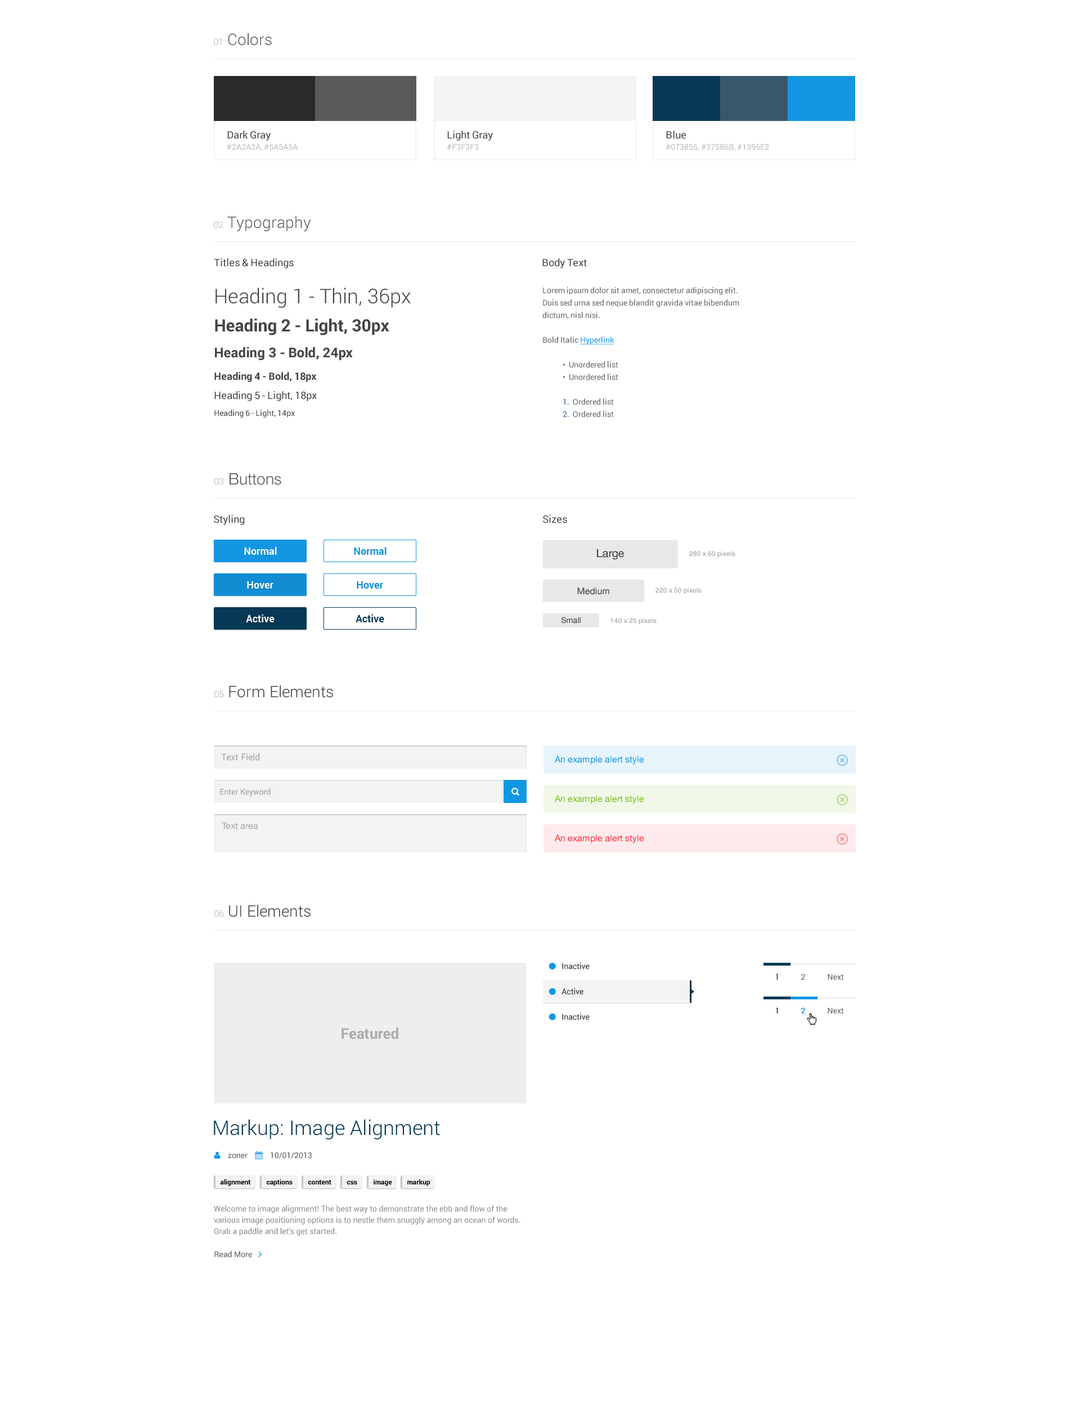
<style>
.page{position:relative;width:1069px;height:1418px;background:#ffffff}
.page>*{position:absolute;margin:0}
.t1{font:15.8px "Roboto-Light";color:#5a5a5a}
.t2{font:9px "Roboto-Light";color:#aaaaaa}
.t3{font:7.9px/11.2px "Roboto-Regular";color:#bbbbbb;text-transform:uppercase}
.t4{font:10.1px "Roboto-Regular";color:#444444}
.t5{font:16.9px/28.1px "Roboto-Bold";color:#444444}
.t6{font:20.2px/28.1px "Roboto-Light";color:#444444}
.t7{font:13.5px/25.9px "Roboto-Bold";color:#444444}
.t8{font:10.1px/22.5px "Roboto-Bold";color:#444444}
.t9{font:10.1px/19.1px "Roboto-Regular";color:#444444}
.t10{font:7.9px/16.9px "Roboto-Regular";color:#444444}
.t11{font:7.9px/12.4px "Roboto-Regular";color:#666666}
.t12{font:7.9px/12.4px "Roboto-Regular";color:#1396e2;text-decoration:underline}
.t13{font:7.9px/12.4px "Roboto-Regular";color:#3464a7}
.t14{font:15.8px "HelveticaNeue-Light";color:#5a5a5a}
.t15{font:9px "HelveticaNeue-Light";color:#aaaaaa}
.t16{font:10.1px "Roboto-Bold";color:#ffffff}
.t17{font:10.1px "Roboto-Bold";color:#1396e2}
.t18{font:11.2px "HelveticaNeue";color:#3b3b3b}
.t19{font:6.8px "HelveticaNeue-Medium";color:#a4a4a4}
.t20{font:10.1px "Roboto-Bold";color:#128dd4}
.t21{font:9px "HelveticaNeue";color:#3b3b3b}
.t22{font:10.1px "Roboto-Bold";color:#073855}
.t23{font:7.9px "HelveticaNeue";color:#3b3b3b}
.t24{font:15.8px "Roboto-Light";color:#444444}
.t25{font:9px "Roboto-Regular";color:#a4a4a4}
.t26{font:9px "HelveticaNeue";color:#1396e2}
.t27{font:7.9px "Roboto-Regular";color:#999999}
.t28{font:9px "HelveticaNeue";color:#76bd22}
.t29{font:9px "HelveticaNeue";color:#a4a4a4}
.t30{font:9px "HelveticaNeue";color:#f63440}
.t31{font:7.9px "Roboto-Regular";color:#073855}
.t32{font:7.9px "Roboto-Regular";color:#5a5a5a}
.t33{font:7.9px "Roboto-Regular";color:#1396e2}
.t34{font:14.6px "Roboto-Bold";color:#aaaaaa}
.t35{font:20.2px "Roboto-Light";color:#073855}
.t36{font:6.7px "Roboto-Bold";color:#000000}
.t37{font:7.9px/11.2px "Roboto-Regular";color:#8b8b8b}
</style>
<div class="page">
<p class="t1" style="left:214px;top:33px;width:58px;height:13px"><span class="t2">01 </span>Colors</p>
<p class="t3" style="left:227px;top:130px;width:71px;height:21px"><span class="t4">Dark Gray<br></span>#2a2a2a, #5a5a5a</p>
<p class="t4" style="left:447px;top:130px;width:46px;height:20px">Light Gray<br><span class="t3">#f3f3f3</span></p>
<p class="t3" style="left:665px;top:130px;width:104px;height:21px"><span class="t4">Blue<br></span>#073855, #37586b, #1396e2</p>
<p class="t1" style="left:214px;top:215px;width:97px;height:16px"><span class="t2">02 </span>Typography</p>
<p class="t4" style="left:214px;top:258px;width:80px;height:10px">Titles &amp; Headings</p>
<p class="t4" style="left:542px;top:258px;width:45px;height:10px">Body Text</p>
<p class="t5" style="left:214px;top:287px;width:197px;height:130px"><span class="t6">Heading 1 - Thin, 36px<br></span>Heading 2 - Light, 30px<br><span class="t7">Heading 3 - Bold, 24px<br></span><span class="t8">Heading 4 - Bold, 18px<br></span><span class="t9">Heading 5 - Light, 18px<br></span><span class="t10">Heading 6 - Light, 14px</span></p>
<p class="t11" style="left:542px;top:287px;width:197px;height:130px">Lorem ipsum dolor sit amet, consectetur adipiscing elit. Duis sed urna sed neque blandit gravida vitae bibendum dictum, nisl nisi.<br><br>Bold Italic <span class="t12">Hyperlink <br><br> </span><span class="t13">•</span>  Unordered list<br> <span class="t13">•</span>  Unordered list<br><br> <span class="t13">1.</span>  Ordered list<br> <span class="t13">2.</span>  Ordered list</p>
<p class="t14" style="left:214px;top:473px;width:67px;height:12px"><span class="t15">03 </span>Buttons</p>
<p class="t4" style="left:214px;top:515px;width:31px;height:10px">Styling</p>
<p class="t4" style="left:543px;top:515px;width:24px;height:8px">Sizes</p>
<p class="t16" style="left:244px;top:547px;width:33px;height:8px">Normal</p>
<p class="t17" style="left:354px;top:547px;width:32px;height:8px">Normal</p>
<p class="t18" style="left:597px;top:548px;width:27px;height:12px">Large</p>
<p class="t19" style="left:689px;top:551px;width:46px;height:6px">280 x 60 pixels</p>
<p class="t16" style="left:247px;top:581px;width:26px;height:7px">Hover</p>
<p class="t20" style="left:357px;top:581px;width:26px;height:7px">Hover</p>
<p class="t21" style="left:577px;top:587px;width:32px;height:8px">Medium</p>
<p class="t19" style="left:655px;top:587px;width:46px;height:7px">220 x 50 pixels</p>
<p class="t16" style="left:246px;top:614px;width:28px;height:8px">Active</p>
<p class="t22" style="left:356px;top:614px;width:28px;height:8px">Active</p>
<p class="t23" style="left:561px;top:616px;width:19px;height:7px">Small</p>
<p class="t19" style="left:610px;top:618px;width:46px;height:6px">140 x 25 pixels</p>
<p class="t24" style="left:214px;top:685px;width:119px;height:13px"><span class="t2">05</span> Form Elements</p>
<p class="t25" style="left:221px;top:753px;width:39px;height:7px">Text Field</p>
<p class="t26" style="left:555px;top:755px;width:89px;height:9px">An example alert style</p>
<p class="t27" style="left:220px;top:788px;width:51px;height:8px">Enter Keyword</p>
<p class="t28" style="left:555px;top:795px;width:89px;height:9px">An example alert style</p>
<p class="t29" style="left:222px;top:822px;width:36px;height:7px">Text area</p>
<p class="t30" style="left:555px;top:834px;width:89px;height:9px">An example alert style</p>
<p class="t24" style="left:214px;top:904px;width:96px;height:13px"><span class="t2">06</span> UI Elements</p>
<p class="t31" style="left:775px;top:974px;width:3px;height:5px">1</p>
<p class="t32" style="left:801px;top:974px;width:4px;height:5px">2</p>
<p class="t32" style="left:827px;top:974px;width:17px;height:6px">Next</p>
<p class="t31" style="left:775px;top:1007px;width:3px;height:6px">1</p>
<p class="t33" style="left:801px;top:1007px;width:4px;height:6px">2</p>
<p class="t33" style="left:801px;top:1007px;width:4px;height:6px">2</p>
<p class="t32" style="left:827px;top:1007px;width:17px;height:7px">Next</p>
<p class="t34" style="left:341px;top:1027px;width:57px;height:12px">Featured</p>
<p class="t35" style="left:214px;top:1119px;width:226px;height:20px">Markup: Image Alignment</p>
<p class="t32" style="left:228px;top:1153px;width:20px;height:5px">zoner</p>
<p class="t32" style="left:271px;top:1152px;width:41px;height:6px">10/01/2013</p>
<p class="t36" style="left:220px;top:1178px;width:30px;height:8px">alignment</p>
<p class="t36" style="left:266px;top:1178px;width:26px;height:8px">captions</p>
<p class="t36" style="left:308px;top:1180px;width:23px;height:4px">content</p>
<p class="t36" style="left:346px;top:1180px;width:11px;height:4px">css</p>
<p class="t36" style="left:374px;top:1178px;width:18px;height:8px">image</p>
<p class="t36" style="left:407px;top:1178px;width:23px;height:8px">markup</p>
<p class="t37" style="left:214px;top:1205px;width:306px;height:30px">Welcome to image alignment! The best way to demonstrate the ebb and flow of the various image positioning options is to nestle them snuggly among an ocean of words. Grab a paddle and let’s get started.</p>
<p class="t32" style="left:214px;top:1250px;width:38px;height:7px">Read More</p>
</div>
